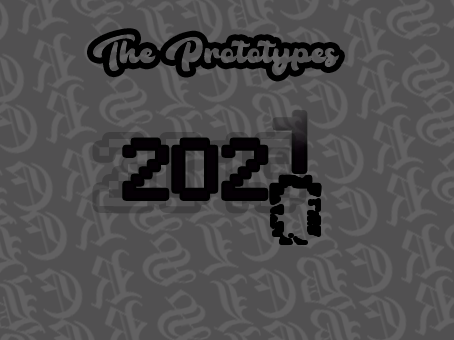
<style>
.page{position:relative;width:454px;height:340px;background:#515051}
.page>*{position:absolute;margin:0}
.t1{font:32px "TheBambankScript";color:#535253}
.t2{font:77.2px "Small Fonts";scale:1.59 1}
.t3{font:76.6px "Small Fonts";color:#050005;scale:1.37 1}
.t4{font:87.2px "Small Fonts";color:#000000;scale:1.36 1}
</style>
<div class="page">
<p class="t1" style="left:93px;top:34px;width:246px;height:42px">The Prototypes</p>
<p class="t1" style="left:93px;top:34px;width:246px;height:42px">The Prototypes</p>
<p class="t2" style="left:275px;top:113px;width:30px;height:58px">1</p>
<p class="t2" style="left:275px;top:113px;width:30px;height:58px">1</p>
<p class="t2" style="left:275px;top:113px;width:30px;height:58px">1</p>
<p class="t3" style="left:125px;top:140px;width:141px;height:58px">202</p>
<p class="t4" style="left:272px;top:177px;width:47px;height:66px">0</p>
</div>
